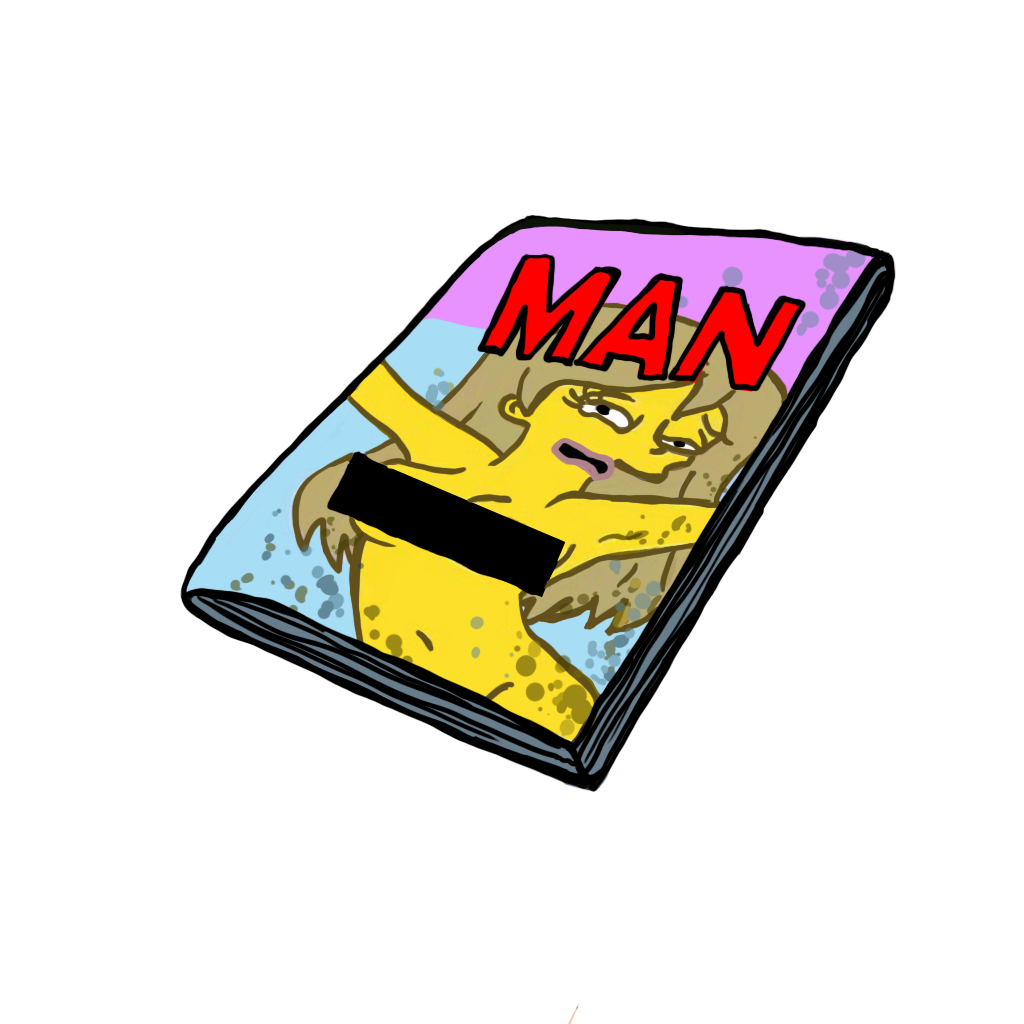
<style>
.page{position:relative;width:1024px;height:1024px;background:#ffffff}
.page>*{position:absolute;margin:0}
.t1{font:150.5px "BerlinSansFBDemi-Bold";color:#ff0000;scale:0.86 1}
</style>
<div class="page">
<p class="t1" style="left:478px;top:260px;width:326px;height:132px;rotate:9deg">MAN</p>
</div>
